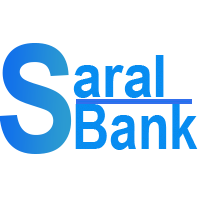
<style>
.page{position:relative;width:200px;height:200px;background:#ffffff}
.page>*{position:absolute;margin:0}
.t1{font:150.4px "ArialNarrow-Bold";color:#1f86de}
.t2{font:58.7px "ArialNarrow-Bold";color:#078df3;scale:1.12 1}
.t3{font:63px "ArialNarrow-Bold";color:#078df3}
</style>
<div class="page">
<p class="t1" style="left:0px;top:43px;width:72px;height:111px">S</p>
<p class="t2" style="left:73px;top:55px;width:91px;height:43px">aral</p>
<p class="t3" style="left:75px;top:104px;width:123px;height:46px">Bank</p>
</div>
